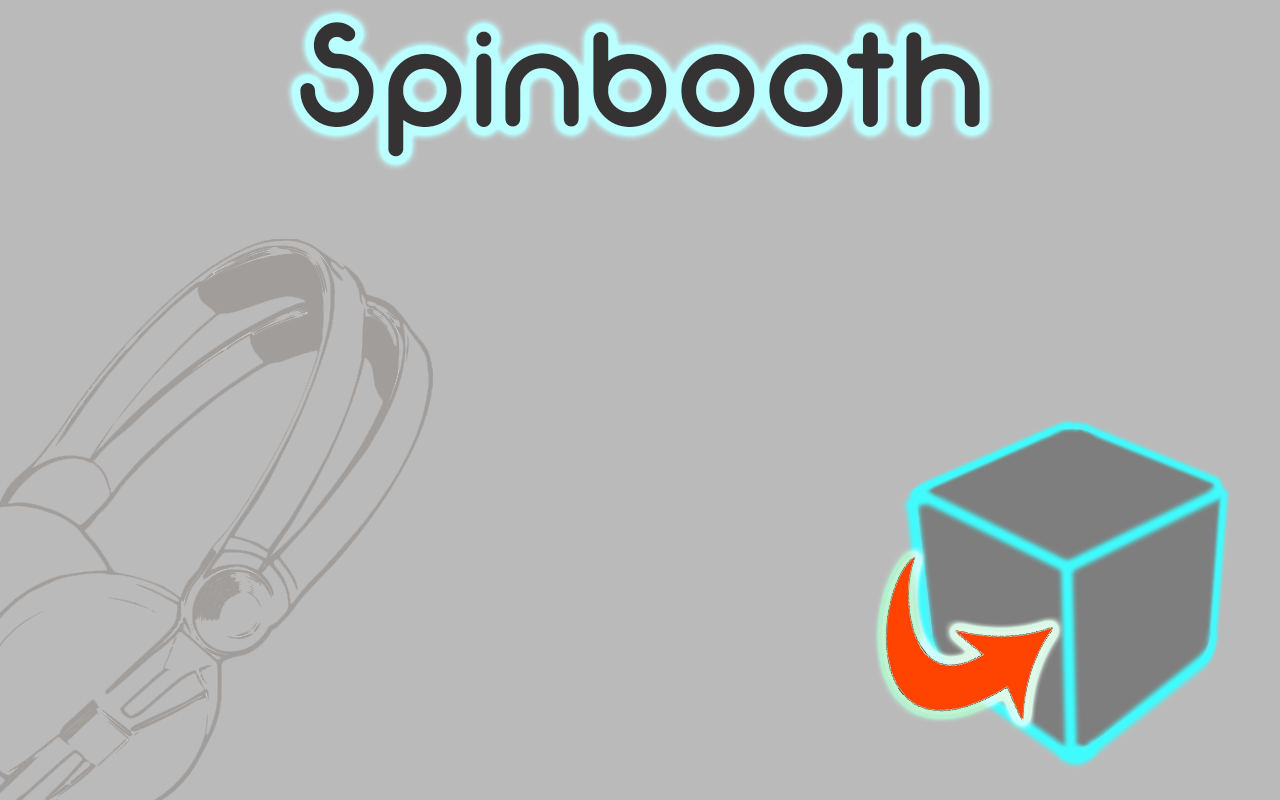
<style>
.page{position:relative;width:1280px;height:800px;background:#bbbaba}
.page>*{position:absolute;margin:0}
.t1{font:150px "Neon80s";color:#343232}
</style>
<div class="page">
<p class="t1" style="left:300px;top:22px;width:680px;height:135px">Spinbooth</p>
</div>
